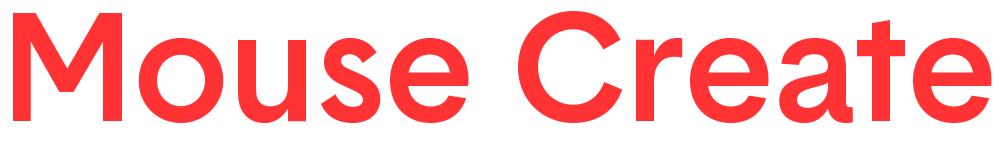
<style>
.page{position:relative;width:1000px;height:142px;background:#ffffff}
.page>*{position:absolute;margin:0}
.t1{font:150px "Basetica-Medium";color:#ff3333}
</style>
<div class="page">
<p class="t1" style="left:13px;top:11px;width:979px;height:113px">Mouse Create</p>
</div>
